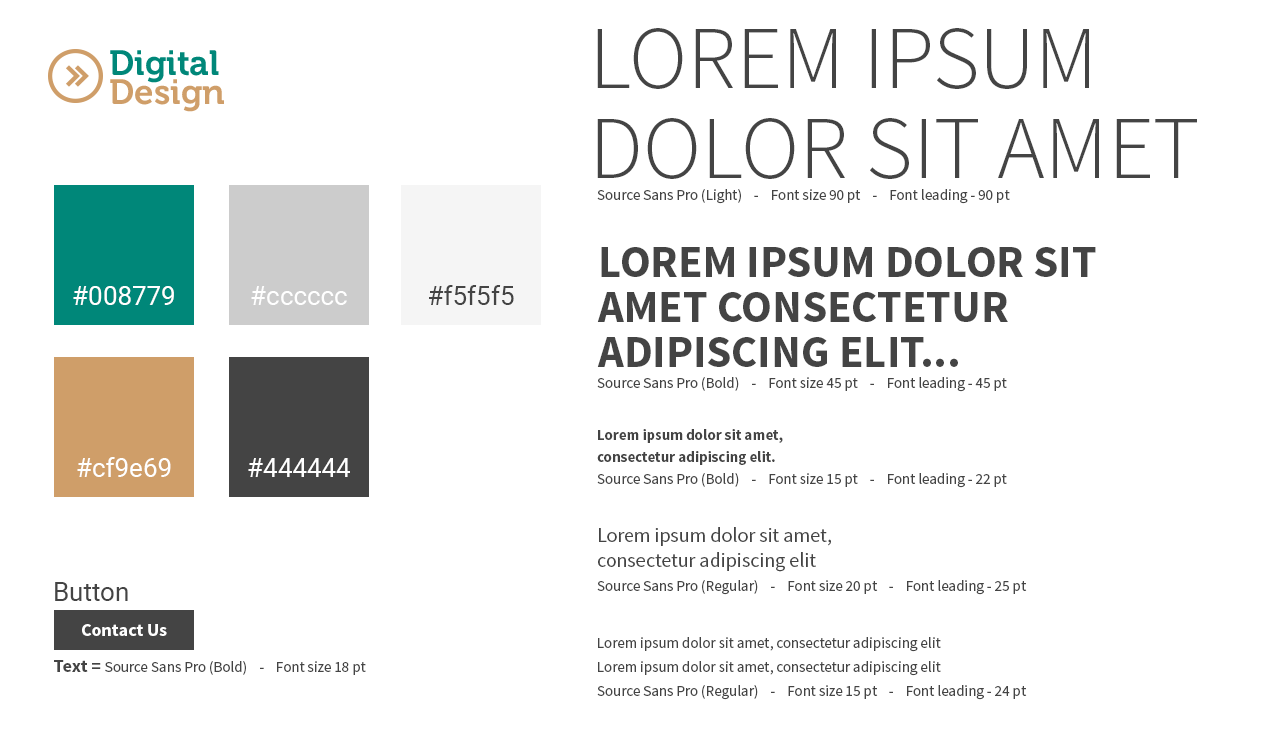
<style>
.page{position:relative;width:1270px;height:730px;background:#ffffff}
.page>*{position:absolute;margin:0}
.t1{font:90px/90px "SourceSansPro-Light";color:#444444;text-transform:uppercase}
.t2{font:15px "SourceSansPro-Regular";color:#444444}
.t3{font:45px/45px "SourceSansPro-Bold";color:#444444;text-transform:uppercase}
.t4{font:26px "Roboto-Regular";color:#ffffff}
.t5{font:26px "Roboto-Regular";color:#444444}
.t6{font:15px/22px "SourceSansPro-Bold";color:#444444}
.t7{font:20px/25px "SourceSansPro-Regular";color:#444444}
.t8{font:18px "SourceSansPro-Bold";color:#ffffff}
.t9{font:15px/24px "SourceSansPro-Regular";color:#444444}
.t10{font:18px "SourceSansPro-Bold";color:#444444}
</style>
<div class="page">
<p class="t1" style="left:597px;top:28px;width:600px;height:151px">Lorem ipsum<br>dolor sit amet</p>
<p class="t2" style="left:597px;top:189px;width:413px;height:15px">Source Sans Pro (Light)    -    Font size 90 pt    -    Font leading - 90 pt</p>
<p class="t3" style="left:597px;top:247px;width:499px;height:120px">Lorem ipsum dolor sit <br>amet consectetur <br>adipiscing elit...</p>
<p class="t4" style="left:73px;top:286px;width:101px;height:19px">#008779</p>
<p class="t4" style="left:251px;top:286px;width:96px;height:19px">#cccccc</p>
<p class="t5" style="left:429px;top:285px;width:85px;height:20px">#f5f5f5</p>
<p class="t2" style="left:597px;top:377px;width:410px;height:15px">Source Sans Pro (Bold)    -    Font size 45 pt    -    Font leading - 45 pt</p>
<p class="t6" style="left:597px;top:429px;width:186px;height:36px">Lorem ipsum dolor sit amet, <br>consectetur adipiscing elit.</p>
<p class="t4" style="left:77px;top:457px;width:94px;height:20px">#cf9e69</p>
<p class="t4" style="left:248px;top:458px;width:102px;height:19px">#444444</p>
<p class="t2" style="left:597px;top:473px;width:410px;height:15px">Source Sans Pro (Bold)    -    Font size 15 pt    -    Font leading - 22 pt</p>
<p class="t7" style="left:598px;top:527px;width:233px;height:45px">Lorem ipsum dolor sit amet, <br>consectetur adipiscing elit</p>
<p class="t5" style="left:55px;top:582px;width:73px;height:19px">Button</p>
<p class="t2" style="left:597px;top:580px;width:430px;height:15px">Source Sans Pro (Regular)    -    Font size 20 pt    -    Font leading - 25 pt</p>
<p class="t8" style="left:82px;top:624px;width:85px;height:12px">Contact Us</p>
<p class="t9" style="left:598px;top:637px;width:343px;height:39px">Lorem ipsum dolor sit amet, consectetur adipiscing elit<br>Lorem ipsum dolor sit amet, consectetur adipiscing elit</p>
<p class="t2" style="left:54px;top:660px;width:312px;height:15px"><span class="t10">Text = </span>Source Sans Pro (Bold)    -    Font size 18 pt</p>
<p class="t2" style="left:597px;top:685px;width:430px;height:15px">Source Sans Pro (Regular)    -    Font size 15 pt    -    Font leading - 24 pt</p>
</div>
